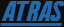
<style>
.page{position:relative;width:64px;height:27px;background:#226aac}
.page>*{position:absolute;margin:0}
.t1{font:28.3px "RadiumCorp";color:#226aac;scale:1.17 1}
</style>
<div class="page">
<p class="t1" style="left:0px;top:1px;width:65px;height:25px">atras</p>
</div>
